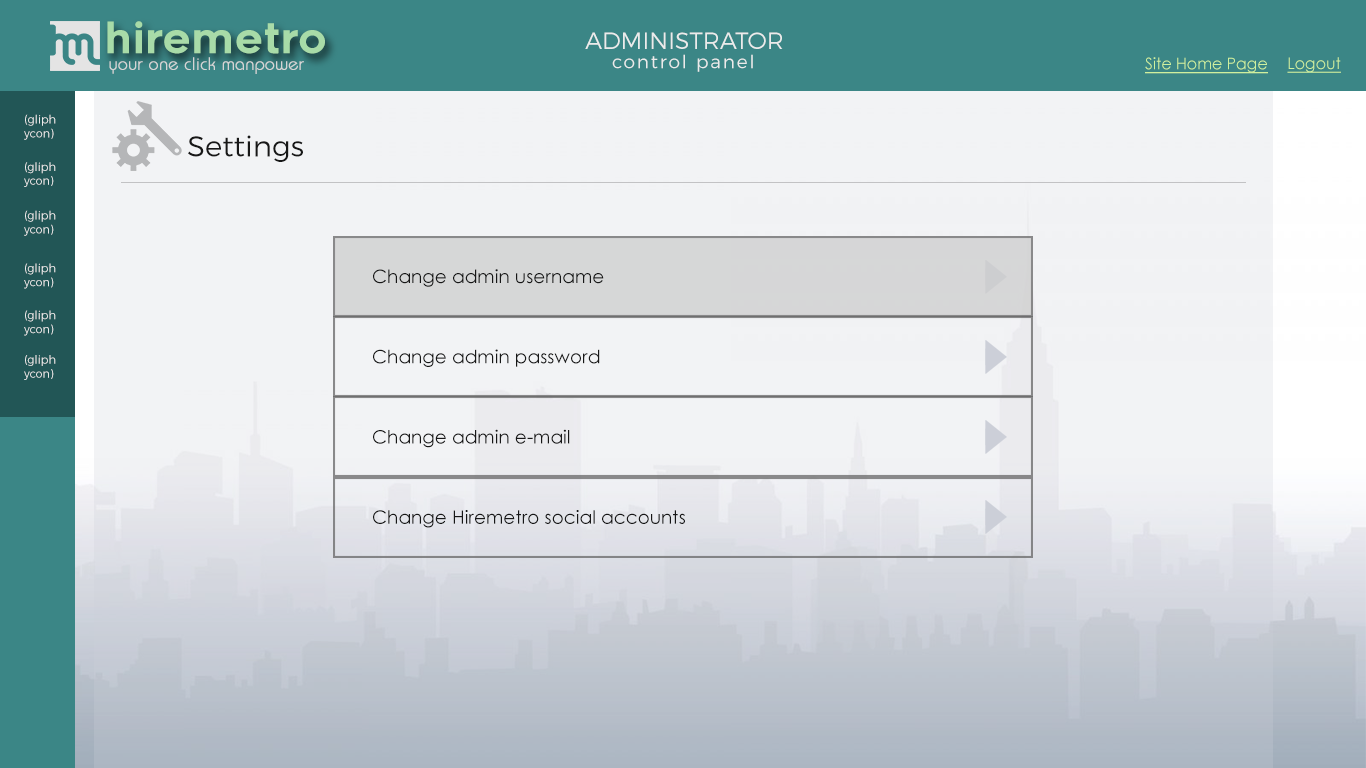
<style>
.page{position:relative;width:1366px;height:768px;background:#f2f3f5}
.page>*{position:absolute;margin:0}
.t1{font:42.1px "Renogare-Regular";color:#a8dba8}
.t2{font:23.6px "Montserrat-Light";color:#ebebeb}
.t3{font:18.4px "Montserrat-Light";letter-spacing:0.1em;color:#ebebeb}
.t4{font:17.5px "Brie-Light";color:#d5d5d5;font-weight:bold}
.t5{font:16.1px "CenturyGothic";color:#cff09e;text-decoration:underline}
.t6{font:11.5px "Montserrat-Light";color:#ebebeb}
.t7{font:28.9px "Montserrat-Light";color:#171717}
.t8{font:18.6px "CenturyGothic";color:#171717}
</style>
<div class="page">
<p class="t1" style="left:107px;top:21px;width:218px;height:33px">hiremetro</p>
<p class="t2" style="left:585px;top:32px;width:198px;height:17px">ADMINISTRATOR</p>
<p class="t3" style="left:612px;top:54px;width:141px;height:18px">control panel</p>
<p class="t4" style="left:109px;top:57px;width:195px;height:17px">your one click manpower</p>
<p class="t5" style="left:1145px;top:57px;width:123px;height:17px">Site Home Page</p>
<p class="t5" style="left:1287px;top:57px;width:54px;height:16px">Logout</p>
<p class="t6" style="left:24px;top:114px;width:32px;height:26px">(gliph<br>ycon)</p>
<p class="t7" style="left:188px;top:135px;width:115px;height:27px">Settings</p>
<p class="t6" style="left:24px;top:162px;width:32px;height:25px">(gliph<br>ycon)</p>
<p class="t6" style="left:24px;top:210px;width:32px;height:26px">(gliph<br>ycon)</p>
<p class="t6" style="left:24px;top:263px;width:32px;height:26px">(gliph<br>ycon)</p>
<p class="t8" style="left:373px;top:269px;width:231px;height:18px">Change admin username</p>
<p class="t6" style="left:24px;top:310px;width:32px;height:26px">(gliph<br>ycon)</p>
<p class="t8" style="left:373px;top:349px;width:227px;height:18px">Change admin password</p>
<p class="t6" style="left:24px;top:355px;width:32px;height:25px">(gliph<br>ycon)</p>
<p class="t8" style="left:373px;top:429px;width:197px;height:19px">Change admin e-mail</p>
<p class="t8" style="left:373px;top:510px;width:312px;height:18px">Change Hiremetro social accounts</p>
</div>
